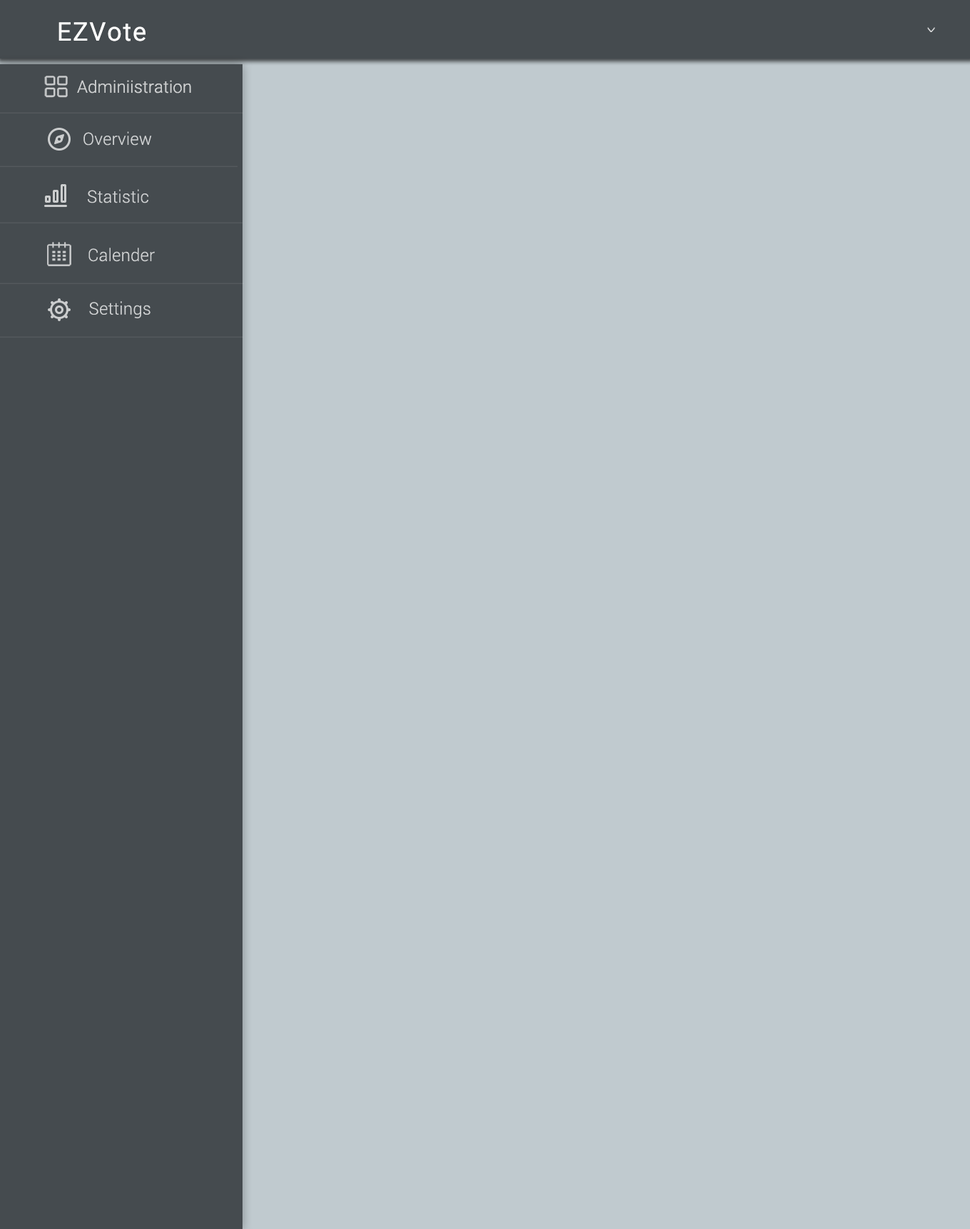
<style>
.page{position:relative;width:970px;height:1229px;background:#c0cacf}
.page>*{position:absolute;margin:0}
.t1{font:25.7px "Roboto-Regular";letter-spacing:0.05em;color:#ffffff}
.t2{font:17.1px "Roboto-Light";letter-spacing:0.005em;color:#d0d2d3}
</style>
<div class="page">
<p class="t1" style="left:59px;top:22px;width:87px;height:19px">EZVote</p>
<p class="t2" style="left:77px;top:80px;width:114px;height:13px">Adminiistration</p>
<p class="t2" style="left:83px;top:131px;width:69px;height:15px">Overview</p>
<p class="t2" style="left:88px;top:189px;width:60px;height:14px">Statistic</p>
<p class="t2" style="left:88px;top:248px;width:67px;height:14px">Calender</p>
<p class="t2" style="left:89px;top:301px;width:62px;height:17px">Settings</p>
</div>
